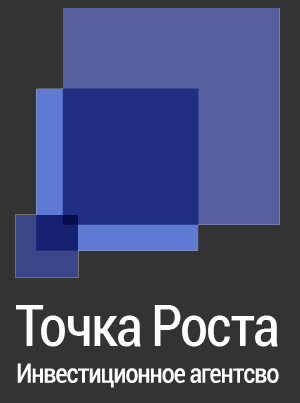
<style>
.page{position:relative;width:300px;height:403px;background:#333333}
.page>*{position:absolute;margin:0}
.t1{font:57.3px "Roboto-Condensed";letter-spacing:-0.04em;color:#ffffff}
.t2{font:26.7px "Roboto-Condensed";letter-spacing:-0.04em;color:#ffffff}
</style>
<div class="page">
<p class="t1" style="left:16px;top:305px;width:262px;height:42px">Точка Роста</p>
<p class="t2" style="left:17px;top:363px;width:262px;height:25px">Инвестиционное агентсво</p>
</div>
